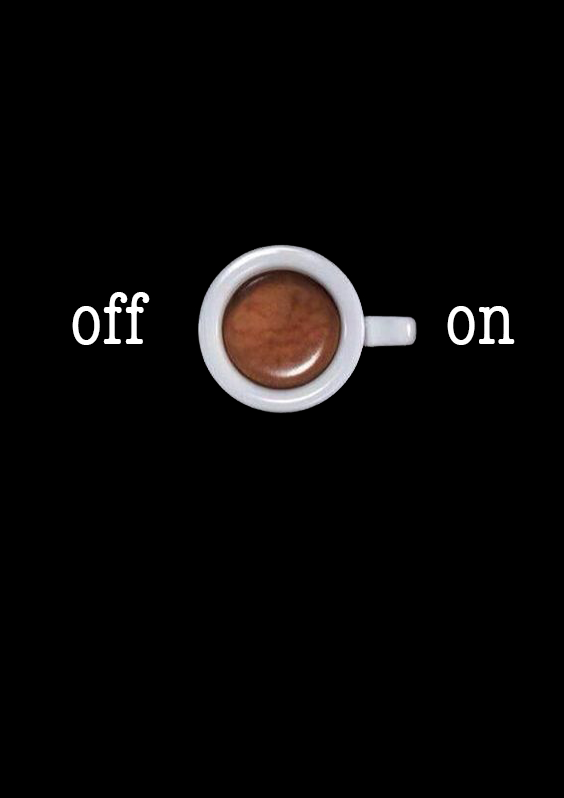
<style>
.page{position:relative;width:564px;height:798px;background:#000000}
.page>*{position:absolute;margin:0}
.t1{font:75.3px "AmericanTypewriter-Condensed";color:#ffffff}
.t2{font:75px "AmericanTypewriter-Condensed";color:#ffffff}
</style>
<div class="page">
<p class="t1" style="left:72px;top:292px;width:78px;height:53px">off</p>
<p class="t2" style="left:447px;top:306px;width:68px;height:39px">on</p>
</div>
